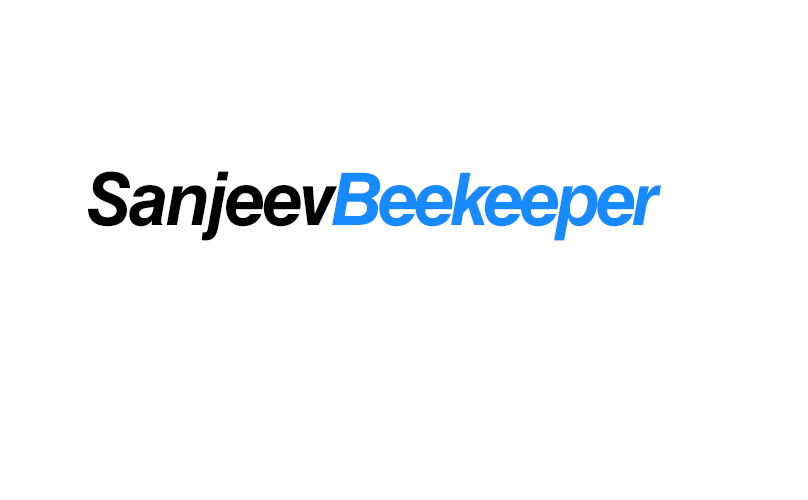
<style>
.page{position:relative;width:808px;height:500px;background:#ffffff}
.page>*{position:absolute;margin:0}
.t1{font:72.8px "HelveticaLTStd-BoldObl";letter-spacing:-0.04em;color:#000000}
.t2{font:72.8px "HelveticaLTStd-BoldObl";letter-spacing:-0.06em;color:#178aff}
</style>
<div class="page">
<p class="t1" style="left:88px;top:171px;width:250px;height:70px">Sanjeev</p>
<p class="t2" style="left:332px;top:172px;width:329px;height:69px">Beekeeper</p>
</div>
